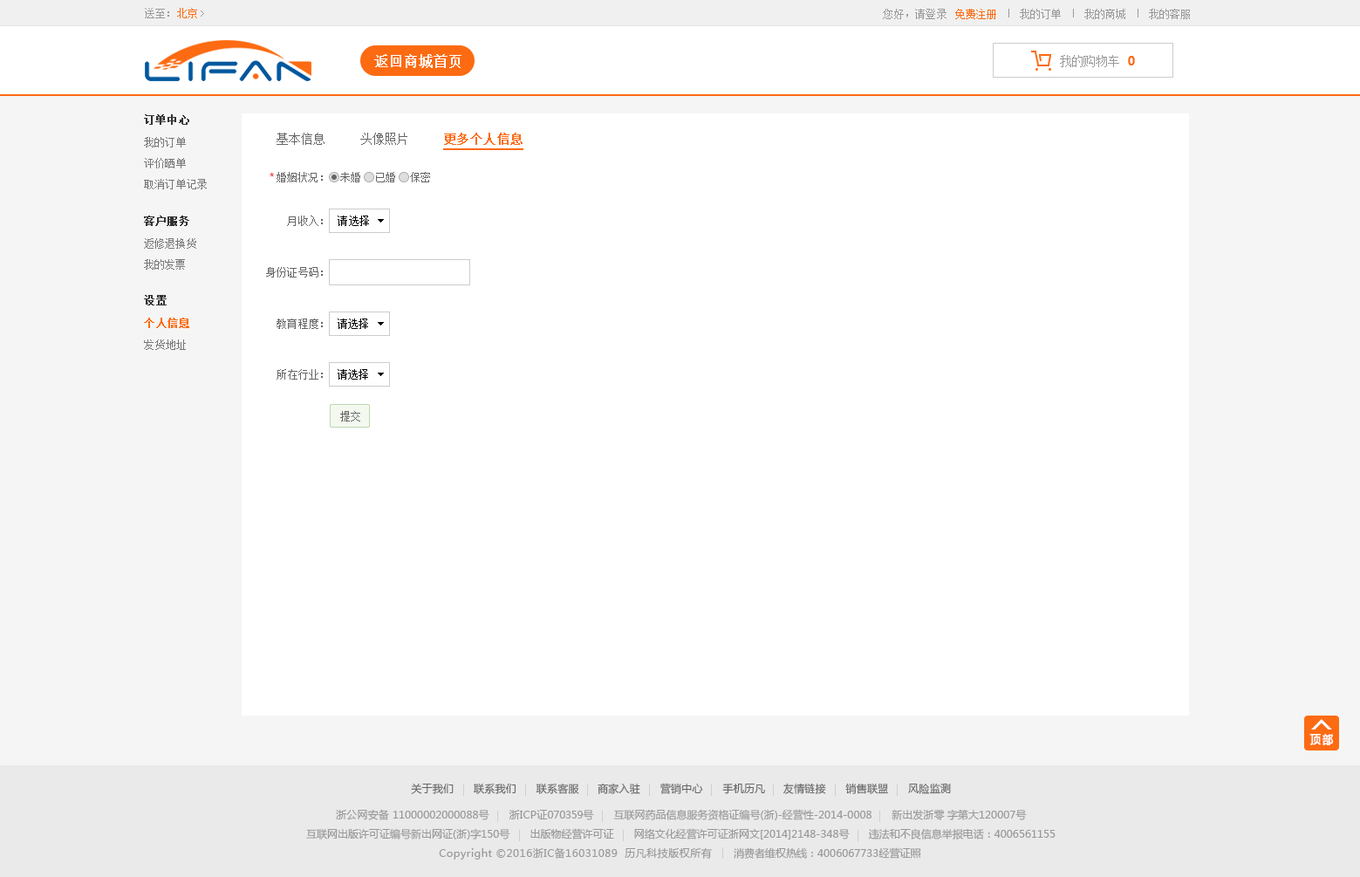
<style>
.page{position:relative;width:1360px;height:877px;background:#ffffff}
.page>*{position:absolute;margin:0}
.t1{font:10.3px "SimSun";letter-spacing:0.02em;color:#999999}
.t2{font:10.3px "SimSun";letter-spacing:0.02em;color:#fc6b12}
.t3{font:10.7px "SimSun";letter-spacing:0.02em;color:#999999}
.t4{font:10.7px "SimSun";letter-spacing:0.02em;color:#fc6b12}
.t5{font:14px "SimSun";color:#ffffff;font-weight:bold}
.t6{font:12.2px "SimSun";letter-spacing:-0.06em;color:#999999}
.t7{font:12.2px "MicrosoftYaHei-Bold";letter-spacing:-0.06em;color:#fc6b12}
.t8{font:10.5px "SimSun";color:#333333;font-weight:bold}
.t9{font:10.5px "SimSun";color:#777777}
.t10{font:12.2px "SimSun";letter-spacing:0.02em;color:#666666}
.t11{font:12.2px "SimSun";letter-spacing:0.02em;color:#fc6b12;font-weight:bold}
.t12{font:10.5px "MicrosoftYaHei";letter-spacing:0.02em}
.t13{font:10.5px "SimSun";letter-spacing:0.02em;color:#666666}
.t14{font:10.5px "SimSun";letter-spacing:0.02em;color:#000000}
.t15{font:10.6px "SimSun";color:#333333;font-weight:bold}
.t16{font:10.6px "SimSun";color:#fc6b12;font-weight:bold}
.t17{font:10.6px "SimSun";color:#777777}
.t18{font:11.5px "MicrosoftYaHei";color:#ffffff;font-weight:bold;scale:0.91 1}
.t19{font:10.5px "MicrosoftYaHei";letter-spacing:0.02em;color:#666666}
.t20{font:10.5px "MicrosoftYaHei";color:#999999}
.t21{font:10.5px "MicrosoftYaHei";letter-spacing:0.02em;color:#999999}
.t22{font:10.5px "MicrosoftYaHei";letter-spacing:-0.02em;color:#999999}
.t23{font:10.5px "MicrosoftYaHei";letter-spacing:0.04em;color:#999999}
</style>
<div class="page">
<p class="t1" style="left:145px;top:8px;width:52px;height:10px">送至：<span class="t2">北京</span></p>
<p class="t3" style="left:883px;top:9px;width:64px;height:10px">您好，请登录</p>
<p class="t4" style="left:955px;top:9px;width:41px;height:10px">免费注册</p>
<p class="t3" style="left:1020px;top:9px;width:41px;height:10px">我的订单</p>
<p class="t3" style="left:1084px;top:9px;width:41px;height:10px">我的商城</p>
<p class="t3" style="left:1149px;top:9px;width:41px;height:10px">我的客服</p>
<p class="t5" style="left:374px;top:54px;width:87px;height:14px">返回商城首页</p>
<p class="t6" style="left:1060px;top:55px;width:59px;height:12px">我的购物车</p>
<p class="t7" style="left:1128px;top:56px;width:7px;height:9px">0</p>
<p class="t8" style="left:144px;top:114px;width:45px;height:11px">订单中心</p>
<p class="t9" style="left:144px;top:137px;width:42px;height:10px">我的订单</p>
<p class="t10" style="left:277px;top:133px;width:48px;height:12px">基本信息</p>
<p class="t10" style="left:360px;top:133px;width:47px;height:12px">头像照片</p>
<p class="t11" style="left:444px;top:133px;width:79px;height:12px">更多个人信息</p>
<p class="t9" style="left:144px;top:158px;width:42px;height:10px">评价晒单</p>
<p class="t12" style="left:270px;top:172px;width:4px;height:5px">*</p>
<p class="t13" style="left:277px;top:172px;width:46px;height:10px">婚姻状况：</p>
<p class="t13" style="left:340px;top:172px;width:20px;height:10px">未婚</p>
<p class="t13" style="left:376px;top:172px;width:19px;height:10px">已婚</p>
<p class="t13" style="left:410px;top:172px;width:20px;height:10px">保密</p>
<p class="t9" style="left:144px;top:179px;width:63px;height:10px">取消订单记录</p>
<p class="t8" style="left:144px;top:215px;width:45px;height:11px">客户服务</p>
<p class="t13" style="left:287px;top:215px;width:36px;height:11px">月收入：</p>
<p class="t14" style="left:338px;top:215px;width:31px;height:11px">请选择</p>
<p class="t9" style="left:144px;top:238px;width:52px;height:11px">返修退换货</p>
<p class="t9" style="left:144px;top:259px;width:41px;height:11px">我的发票</p>
<p class="t13" style="left:266px;top:267px;width:57px;height:10px">身份证号码：</p>
<p class="t15" style="left:144px;top:295px;width:23px;height:10px">设置</p>
<p class="t16" style="left:144px;top:318px;width:45px;height:10px">个人信息</p>
<p class="t13" style="left:277px;top:318px;width:46px;height:11px">教育程度：</p>
<p class="t14" style="left:338px;top:318px;width:30px;height:11px">请选择</p>
<p class="t17" style="left:144px;top:339px;width:42px;height:11px">发货地址</p>
<p class="t13" style="left:277px;top:369px;width:46px;height:10px">所在行业：</p>
<p class="t14" style="left:338px;top:369px;width:30px;height:10px">请选择</p>
<p class="t13" style="left:340px;top:411px;width:20px;height:10px">提交</p>
<p class="t18" style="left:1309px;top:734px;width:25px;height:12px">顶 部</p>
<p class="t19" style="left:411px;top:783px;width:540px;height:11px">关于我们      联系我们      联系客服     商家入驻      营销中心      手机历凡     友情链接      销售联盟      风险监测</p>
<p class="t20" style="left:336px;top:809px;width:691px;height:11px"><span class="t21">浙公网安备 </span>11000002000088<span class="t21">号      浙ICP证</span><span class="t22">070359号     </span>互联网药品信息服务资格证编号(<span class="t21">浙</span>)-经营性-2014-0008      新出发<span class="t21">浙</span>零 字第大120007号</p>
<p class="t20" style="left:306px;top:828px;width:750px;height:11px">互联网出版许可证编号新出网证(<span class="t21">浙</span>)字150号       出版物经营许可证       网络文化经营许可证<span class="t21">浙</span>网文[2014]2148-348号       违法和不良信息举报电话：4006561155</p>
<p class="t23" style="left:439px;top:847px;width:482px;height:12px"><span class="t20"><br><br></span>Copyright ©2016浙IC备16031089  历凡科技版权所有<span class="t20">       消费者维权热线：4006067733经营证照</span></p>
</div>
